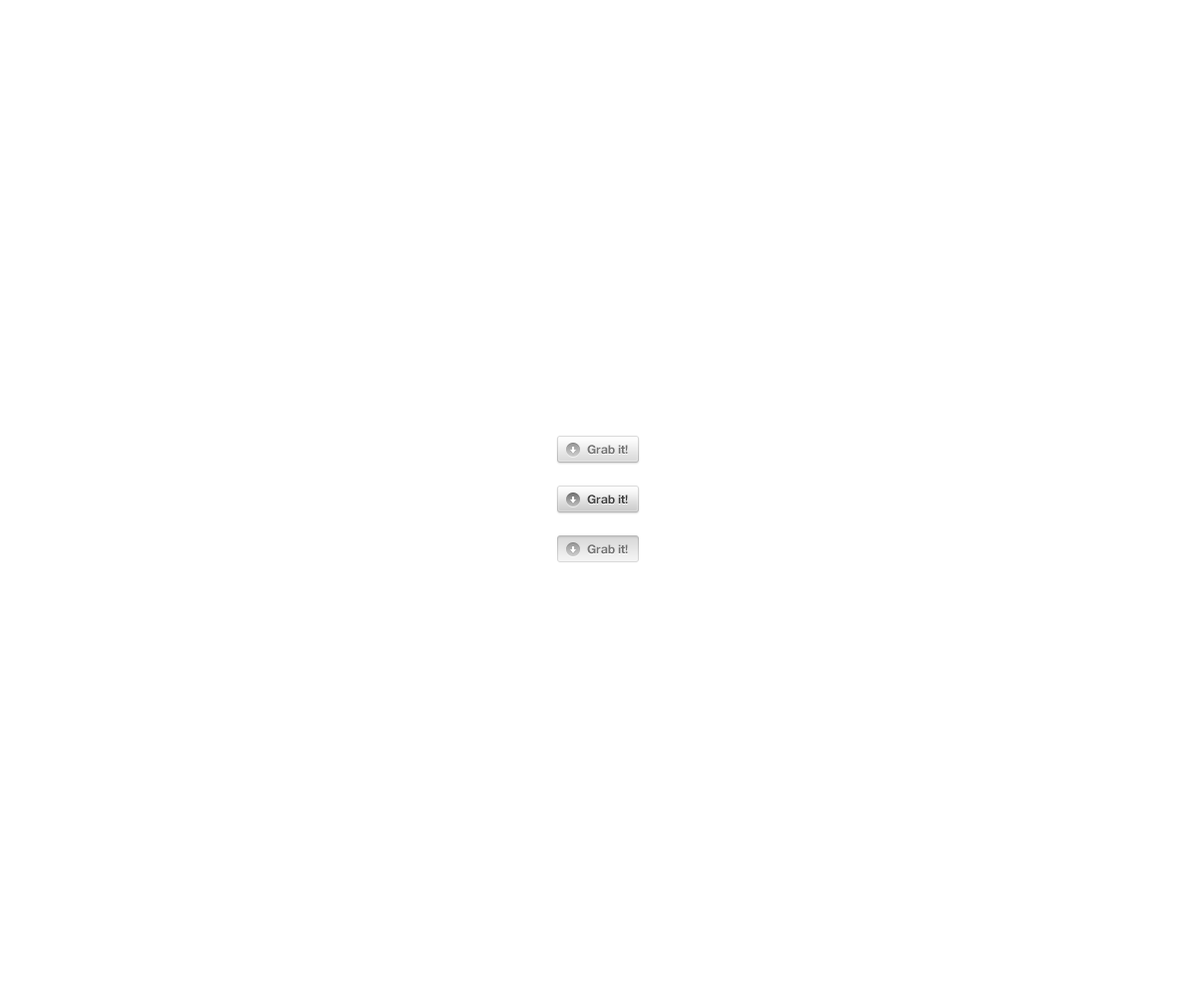
<style>
.page{position:relative;width:1196px;height:997px;background:#ffffff}
.page>*{position:absolute;margin:0}
.t1{font:12px "HelveticaNeue-Bold";color:#727272}
.t2{font:12px "HelveticaNeue-Bold";color:#3e3e3e}
</style>
<div class="page">
<p class="t1" style="left:587px;top:445px;width:41px;height:10px">Grab it!</p>
<p class="t2" style="left:587px;top:494px;width:41px;height:10px">Grab it!</p>
<p class="t1" style="left:587px;top:544px;width:41px;height:10px">Grab it!</p>
</div>
